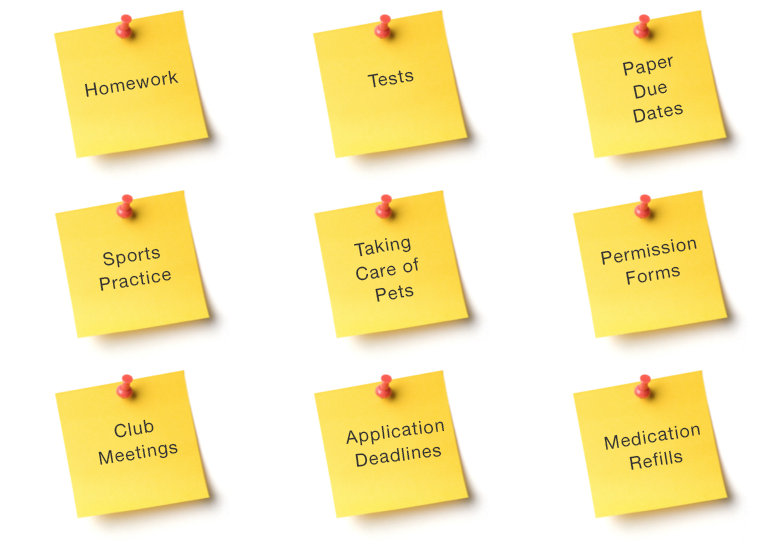
<style>
.page{position:relative;width:780px;height:543px;background:#ffffff}
.page>*{position:absolute;margin:0}
.t1{font:18px/24px "HelveticaNeue";letter-spacing:0.05em;color:#343434}
.t2{font:18px "HelveticaNeue";letter-spacing:0.05em;color:#343434}
</style>
<div class="page">
<p class="t1" style="left:622px;top:56px;width:61px;height:67px;text-align:center;rotate:-12deg">Paper<br>Due <br>Dates</p>
<p class="t2" style="left:84px;top:70px;width:95px;height:27px;rotate:-9deg">Homework</p>
<p class="t2" style="left:367px;top:70px;width:47px;height:18px;rotate:-10deg">Tests</p>
<p class="t1" style="left:354px;top:238px;width:65px;height:64px;text-align:center;rotate:-10deg">Taking <br>Care of <br>Pets</p>
<p class="t1" style="left:601px;top:239px;width:96px;height:46px;text-align:center;rotate:-10deg">Permission<br>Forms</p>
<p class="t1" style="left:99px;top:247px;width:72px;height:44px;text-align:center;rotate:-9deg">Sports<br>Practice</p>
<p class="t1" style="left:98px;top:419px;width:80px;height:46px;text-align:center;rotate:-9deg">Club<br>Meetings</p>
<p class="t1" style="left:346px;top:420px;width:99px;height:47px;text-align:center;rotate:-7deg">Application<br>Deadlines</p>
<p class="t1" style="left:604px;top:425px;width:96px;height:45px;text-align:center;rotate:-9deg">Medication<br>Refills</p>
</div>
